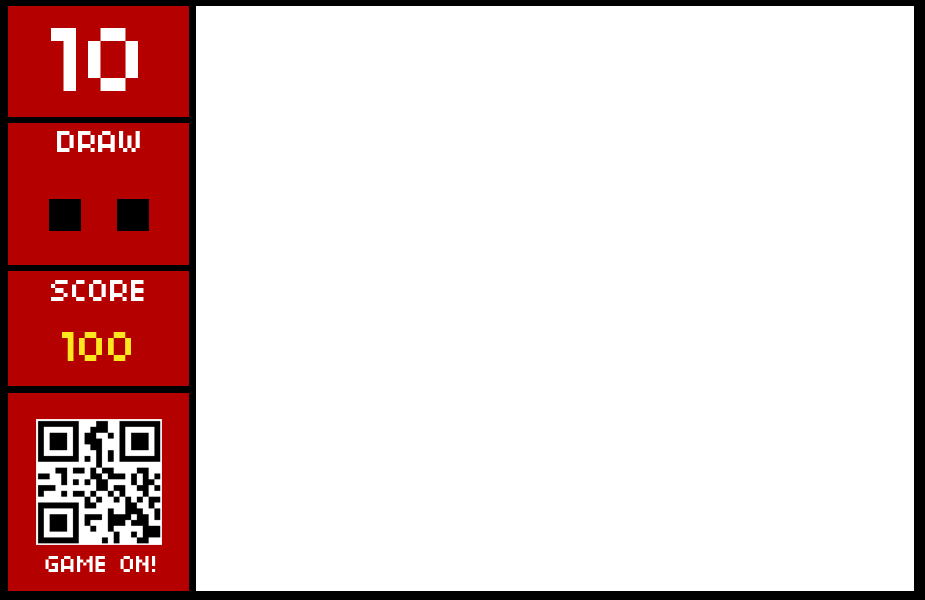
<style>
.page{position:relative;width:925px;height:600px;background:#ffffff}
.page>*{position:absolute;margin:0}
.t1{font:100px "04b03";color:#ffffff}
.t2{font:33.3px "04b03";color:#ffffff}
.t3{font:45.8px "04b03";color:#ffe71f}
.t4{font:25px "04b03";color:#ffffff}
</style>
<div class="page">
<p class="t1" style="left:51px;top:28px;width:87px;height:63px">10</p>
<p class="t2" style="left:57px;top:131px;width:83px;height:21px">DRAW</p>
<p class="t2" style="left:51px;top:280px;width:93px;height:21px">SCORE</p>
<p class="t3" style="left:62px;top:332px;width:69px;height:29px">100</p>
<p class="t4" style="left:45px;top:556px;width:111px;height:16px">GAME ON!</p>
</div>
